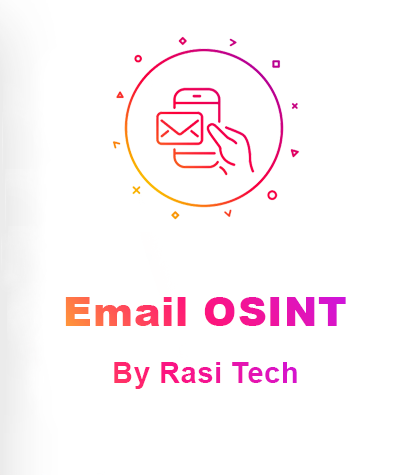
<style>
.page{position:relative;width:394px;height:475px;background:#ffffff}
.page>*{position:absolute;margin:0}
.t1{font:40px "Arial-Black";letter-spacing:0.02em}
.t2{font:29px "Arial-BoldMT";letter-spacing:0.02em}
</style>
<div class="page">
<p class="t1" style="left:65px;top:297px;width:281px;height:29px">Email OSINT</p>
<p class="t2" style="left:114px;top:362px;width:183px;height:27px">By Rasi Tech</p>
</div>
